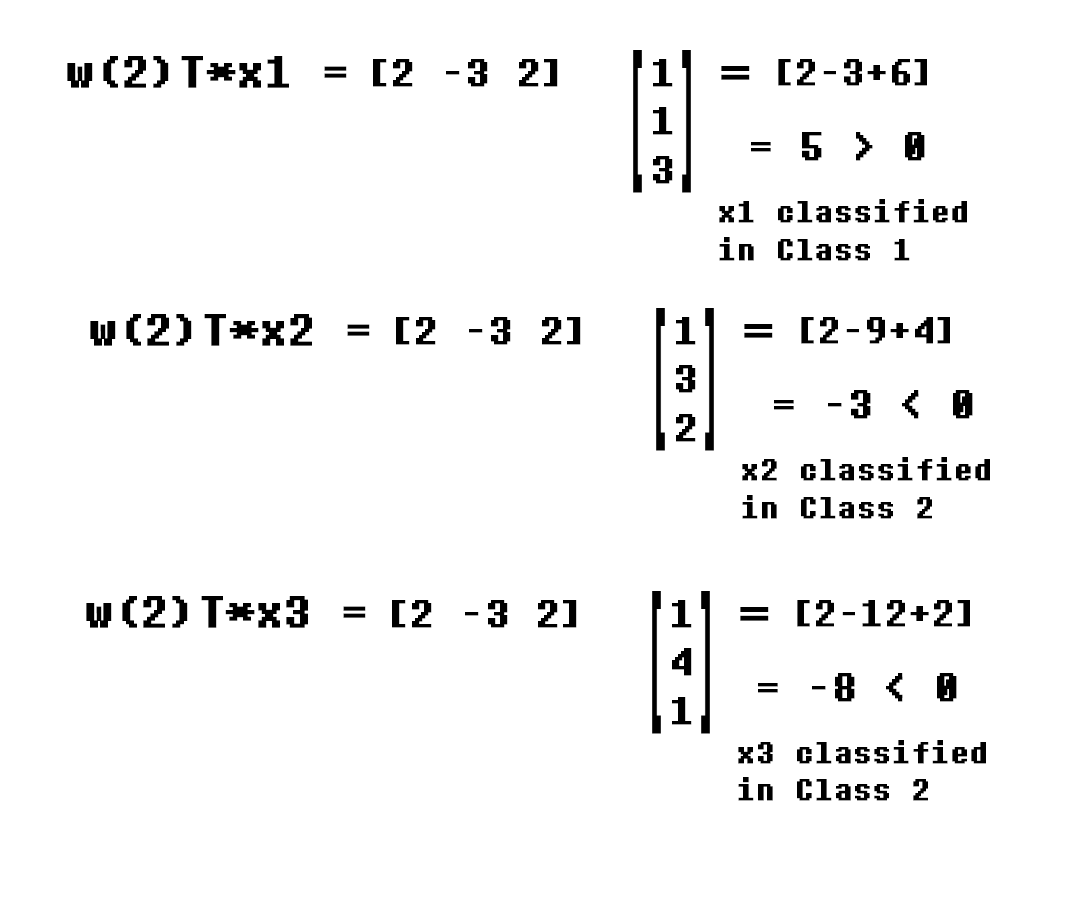
<style>
.page{position:relative;width:1080px;height:922px;background:#ffffff}
.page>*{position:absolute;margin:0}
.t1{font:45.5px "DeterminationMono";color:#000000;font-weight:bold}
.t2{font:40.4px "DeterminationMono";color:#000000;font-weight:bold}
.t3{font:37.8px "DeterminationMono";color:#000000;font-weight:bold}
.t4{font:58.1px "DeterminationMono";color:#000000;font-weight:bold}
.t5{font:41px "DeterminationMono";color:#000000;font-weight:bold}
.t6{font:31px "DeterminationMono";color:#000000;font-weight:bold}
</style>
<div class="page">
<p class="t1" style="left:67px;top:56px;width:280px;height:32px">w(2)T*x1 =</p>
<p class="t2" style="left:373px;top:59px;width:185px;height:28px">[2 -3 2]</p>
<p class="t2" style="left:653px;top:59px;width:20px;height:125px">1<br> 1<br> 3</p>
<p class="t3" style="left:778px;top:59px;width:149px;height:27px">[2-3+6]</p>
<p class="t4" style="left:721px;top:66px;width:29px;height:14px">=</p>
<p class="t5" style="left:751px;top:132px;width:174px;height:29px">= 5 &gt; 0</p>
<p class="t6" style="left:719px;top:199px;width:248px;height:62px">x1 classified <br>in Class 1</p>
<p class="t1" style="left:90px;top:314px;width:280px;height:32px">w(2)T*x2 =</p>
<p class="t2" style="left:396px;top:317px;width:185px;height:28px">[2 -3 2]</p>
<p class="t2" style="left:676px;top:317px;width:20px;height:125px">1<br> 3<br> 2</p>
<p class="t3" style="left:801px;top:317px;width:149px;height:27px">[2-9+4]</p>
<p class="t4" style="left:744px;top:324px;width:29px;height:14px">=</p>
<p class="t5" style="left:774px;top:390px;width:199px;height:29px">= -3 &lt; 0</p>
<p class="t6" style="left:742px;top:457px;width:248px;height:62px">x2 classified <br>in Class 2</p>
<p class="t1" style="left:86px;top:596px;width:280px;height:32px">w(2)T*x3 =</p>
<p class="t2" style="left:392px;top:600px;width:185px;height:28px">[2 -3 2]</p>
<p class="t2" style="left:672px;top:600px;width:20px;height:125px">1<br> 4<br> 1</p>
<p class="t3" style="left:797px;top:600px;width:173px;height:27px">[2-12+2]</p>
<p class="t4" style="left:740px;top:607px;width:29px;height:14px">=</p>
<p class="t5" style="left:758px;top:673px;width:199px;height:29px">= -8 &lt; 0</p>
<p class="t6" style="left:738px;top:740px;width:248px;height:61px">x3 classified <br>in Class 2</p>
</div>
